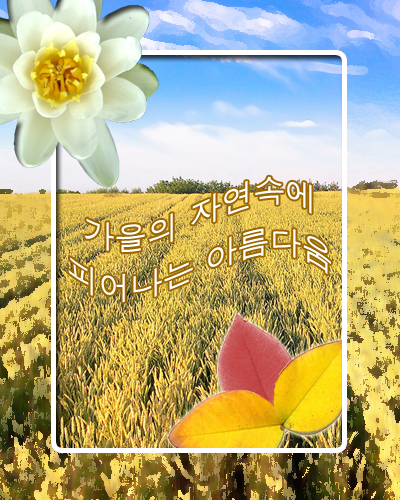
<style>
.page{position:relative;width:400px;height:500px}
.page>*{position:absolute;margin:0}
.t1{font:32px/50px "Dotum";color:#ffffff}
</style>
<div class="page">
<p class="t1" style="left:68px;top:176px;width:263px;height:127px;text-align:center">가을의 자연속에<br>피어나는 아름다움</p>
</div>
